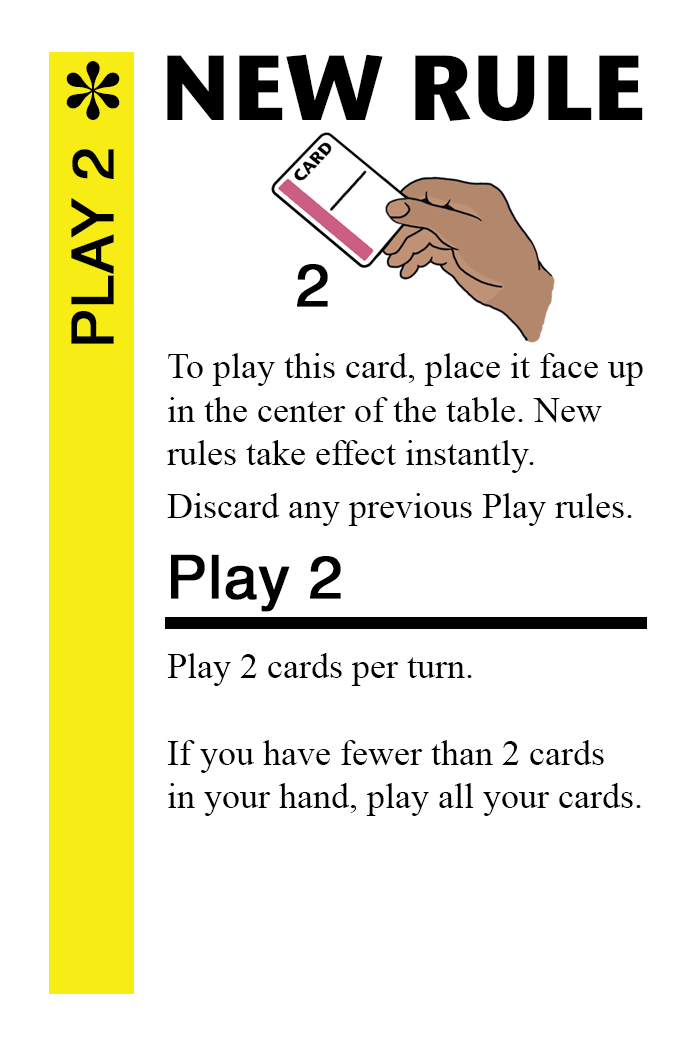
<style>
.page{position:relative;width:700px;height:1042px;background:#ffffff}
.page>*{position:absolute;margin:0}
.t1{font:92px "StoneSansITC-Bold";color:#000000}
.t2{font:82px "MS-Gothic";color:#000000}
.t3{font:58px "Helvetica";color:#000000;font-weight:bold}
.t4{font:60px "Helvetica";color:#000000;font-weight:bold}
.t5{font:36px "TimesNewRomanPSMT";color:#000000}
</style>
<div class="page">
<p class="t1" style="left:167px;top:54px;width:476px;height:67px">NEW RULE</p>
<p class="t2" style="left:66px;top:61px;width:54px;height:59px">✽</p>
<p class="t3" style="left:71px;top:149px;width:43px;height:195px;rotate:-90deg">PLAY 2</p>
<p class="t4" style="left:297px;top:264px;width:31px;height:43px">2</p>
<p class="t5" style="left:167px;top:353px;width:476px;height:120px">To play this card, place it face up<br>in the center of the table. New <br>rules take effect instantly.</p>
<p class="t5" style="left:167px;top:493px;width:465px;height:33px">Discard any previous Play rules.</p>
<p class="t4" style="left:171px;top:554px;width:170px;height:58px">Play 2</p>
<p class="t5" style="left:167px;top:653px;width:474px;height:163px">Play 2 cards per turn.<br><br>If you have fewer than 2 cards<br>in your hand, play all your cards.</p>
</div>
